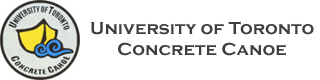
<style>
.page{position:relative;width:320px;height:80px;background:#ffffff}
.page>*{position:absolute;margin:0}
.t1{font:18px "CopperplateGothic-Bold";color:#3e3e3e}
</style>
<div class="page">
<p class="t1" style="left:91px;top:21px;width:223px;height:35px;text-align:center">University of Toronto Concrete Canoe</p>
</div>
